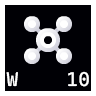
<style>
.page{position:relative;width:96px;height:96px;background:#000005}
.page>*{position:absolute;margin:0}
.t1{font:20px "CascadiaMono-Roman";color:#ffffff}
</style>
<div class="page">
<p class="t1" style="left:6px;top:72px;width:12px;height:15px">W</p>
<p class="t1" style="left:68px;top:71px;width:21px;height:16px">10</p>
</div>
